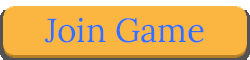
<style>
.page{position:relative;width:250px;height:60px;background:#fab641}
.page>*{position:absolute;margin:0}
.t1{font:33.3px "Lora-Regular";color:#3170ff}
</style>
<div class="page">
<p class="t1" style="left:45px;top:17px;width:159px;height:26px">Join Game</p>
</div>
